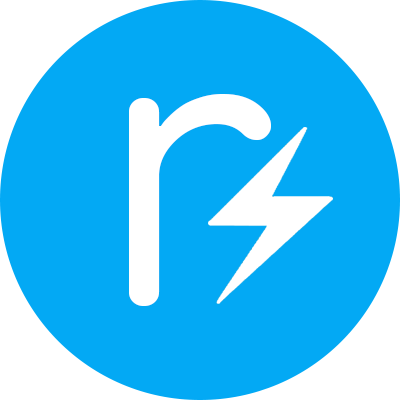
<style>
.page{position:relative;width:400px;height:400px;background:#03a9f4}
.page>*{position:absolute;margin:0}
.t1{font:400px "TTRounds-Regular";color:#ffffff}
</style>
<div class="page">
<p class="t1" style="left:129px;top:94px;width:142px;height:212px">r</p>
</div>
